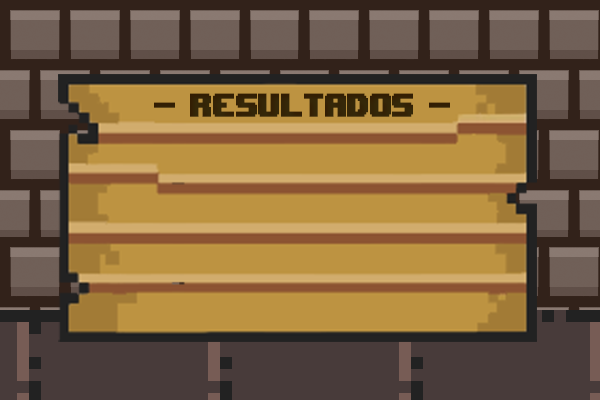
<style>
.page{position:relative;width:600px;height:400px}
.page>*{position:absolute;margin:0}
.t1{font:48px "Upheaval -BRK-";letter-spacing:0.025em;color:#352809;font-weight:bold;scale:0.8 1}
</style>
<div class="page">
<p class="t1" style="left:154px;top:93px;width:296px;height:24px">- RESULTADOS -</p>
</div>
